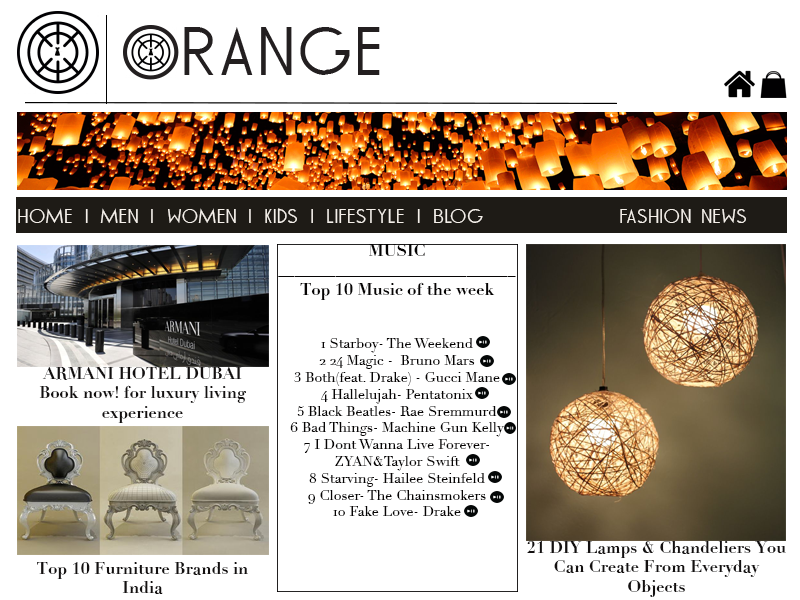
<style>
.page{position:relative;width:800px;height:600px;background:#ffffff}
.page>*{position:absolute;margin:0}
.t1{font:18px "TOMMYHILFIGERAF";color:#f5f0ea}
.t2{font:14px "Didot";color:#060404}
.t3{font:16.4px "Didot-Bold";color:#060404}
.t4{font:16.4px "Didot-Bold";color:#131010}
</style>
<div class="page">
<p class="t1" style="left:18px;top:208px;width:728px;height:15px">HOME | MEN | WOMEN | KIDS | LIfestyle | BLOG               FASHION NEWS</p>
<p class="t2" style="left:278px;top:244px;width:238px;height:272px;text-align:center"><span class="t3">MUSIC <br>_____________________________<br>Top 10 Music of the week<br><br></span><br>1 Starboy- The Weekend <br>2 24 Magic -  Bruno Mars<br>3 Both(feat. Drake) - Gucci Mane<br>4 Hallelujah- Pentatonix<br>5 Black Beatles- Rae Sremmurd<br>6 Bad Things- Machine Gun Kelly <br>7 I Dont Wanna Live Forever- ZYAN&amp;Taylor Swift<br>8 Starving- Hailee Steinfeld <br>9 Closer- The Chainsmokers <br>10 Fake Love- Drake</p>
<p class="t4" style="left:39px;top:367px;width:207px;height:56px;text-align:center">ARMANI HOTEL DUBAI <br>Book now! for luxury living experience</p>
<p class="t4" style="left:527px;top:541px;width:259px;height:56px;text-align:center">21 DIY Lamps &amp; Chandeliers You Can Create From Everyday Objects</p>
<p class="t4" style="left:37px;top:562px;width:211px;height:32px;text-align:center">Top 10 Furniture Brands in India</p>
</div>
